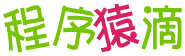
<style>
.page{position:relative;width:185px;height:56px;background:#ffffff}
.page>*{position:absolute;margin:0}
.t1{font:48px "Pop2EG-Bold-T-GB";letter-spacing:0.1em;color:#76c408;scale:0.94 1}
.t2{font:48px "Pop2EG-Bold-T-GB";letter-spacing:0.1em;color:#d62063;scale:0.94 1}
</style>
<div class="page">
<p class="t1" style="left:3px;top:5px;width:47px;height:48px;rotate:-10deg">程</p>
<p class="t1" style="left:52px;top:5px;width:47px;height:45px;rotate:10deg">序</p>
<p class="t2" style="left:93px;top:3px;width:47px;height:50px;rotate:-13deg">猿</p>
<p class="t1" style="left:141px;top:5px;width:41px;height:45px">滴</p>
</div>
